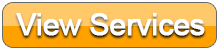
<style>
.page{position:relative;width:220px;height:50px;background:#ffc96a}
.page>*{position:absolute;margin:0}
.t1{font:30px "ArialMT";letter-spacing:-0.025em;color:#ffffff;font-weight:bold}
</style>
<div class="page">
<p class="t1" style="left:16px;top:13px;width:189px;height:23px">View Services</p>
</div>
